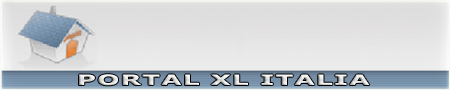
<style>
.page{position:relative;width:450px;height:90px}
.page>*{position:absolute;margin:0}
.t1{font:14.3px "Verdana-Bold";letter-spacing:0.05em;scale:1.82 1}
</style>
<div class="page">
<p class="t1" style="left:79px;top:74px;width:291px;height:12px">PORTAL XL ITALIA</p>
</div>
